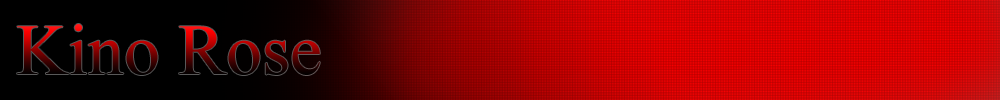
<style>
.page{position:relative;width:1000px;height:100px}
.page>*{position:absolute;margin:0}
.t1{font:72px "TimesNewRomanPSMT";color:#000000}
</style>
<div class="page">
<p class="t1" style="left:17px;top:24px;width:303px;height:51px">Kino Rose</p>
</div>
